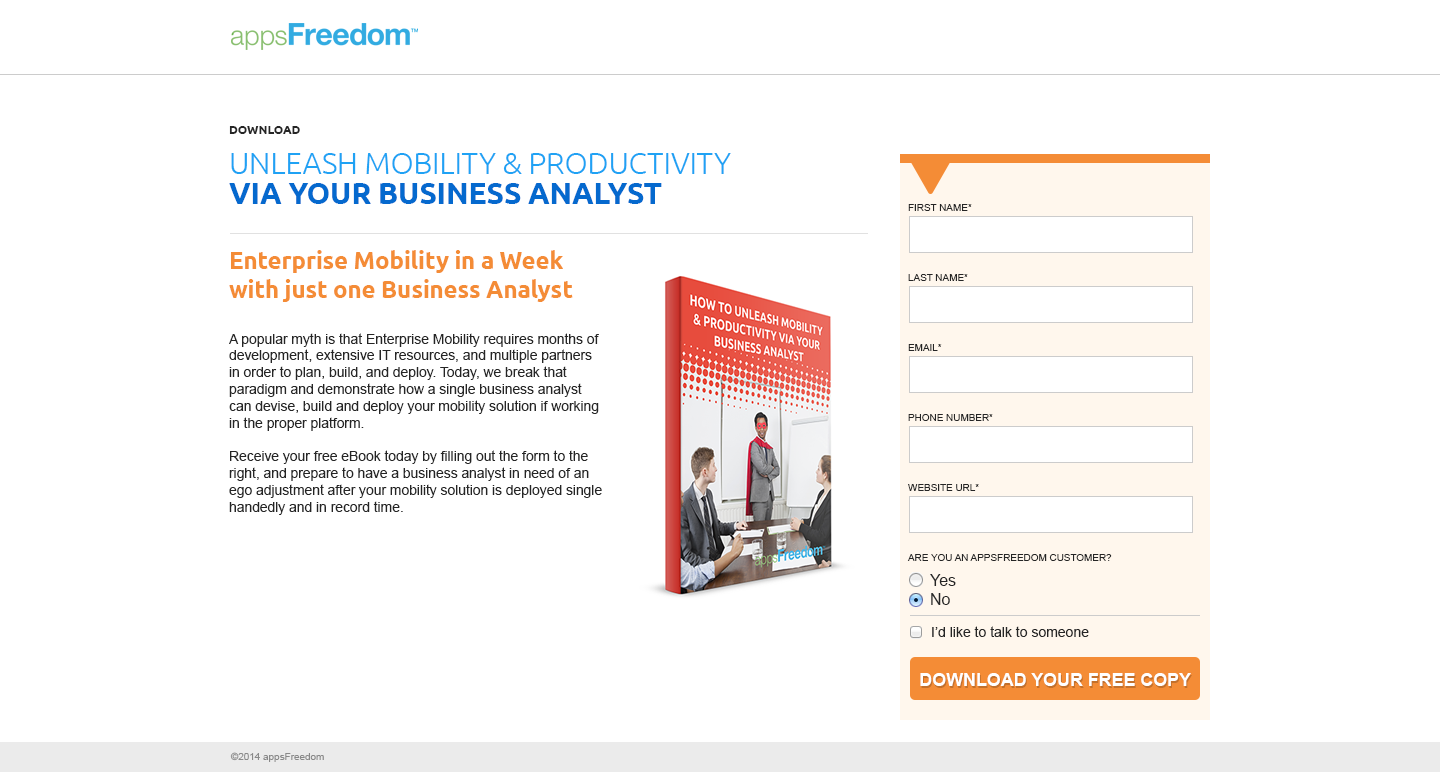
<style>
.page{position:relative;width:1440px;height:772px;background:#ffffff}
.page>*{position:absolute;margin:0}
.t1{font:14px "ArialMT";letter-spacing:-0.005em;color:#252525}
.t2{font:12px/40px "Ubuntu-Bold";letter-spacing:-0.005em;color:#252525;text-transform:uppercase}
.t3{font:30px/40px "Ubuntu-Light";letter-spacing:-0.005em;color:#1fa2f4;text-transform:uppercase}
.t4{font:30px/30px "Ubuntu-Bold";letter-spacing:-0.005em;color:#0569ce;text-transform:uppercase}
.t5{font:24px "Ubuntu-Bold";letter-spacing:-0.005em;color:#f48c36}
.t6{font:10px "ArialMT";letter-spacing:-0.005em;color:#252525;text-transform:uppercase}
.t7{font:16px "ArialMT";color:#252525}
.t8{font:14px "ArialMT";color:#252525}
.t9{font:18px "Arial-BoldMT";letter-spacing:-0.005em;color:#ffffff;text-transform:uppercase}
.t10{font:10px "ArialMT";letter-spacing:-0.005em;color:#898989}
</style>
<div class="page">
<p class="t1" style="left:229px;top:126px;width:502px;height:389px"><span class="t2">Download <br></span><span class="t3">Unleash Mobility &amp; Productivity <br></span><span class="t4">via your Business Analyst<br><br></span><span class="t5">Enterprise Mobility in a Week <br>with just one Business Analyst<br><br></span>A popular myth is that Enterprise Mobility requires months of <br>development, extensive IT resources, and multiple partners <br>in order to plan, build, and deploy. Today, we break that <br>paradigm and demonstrate how a single business analyst <br>can devise, build and deploy your mobility solution if working <br>in the proper platform.<br><br>Receive your free eBook today by filling out the form to the <br>right, and prepare to have a business analyst in need of an <br>ego adjustment after your mobility solution is deployed single <br>handedly and in record time.</p>
<p class="t6" style="left:908px;top:204px;width:64px;height:7px">First name*</p>
<p class="t6" style="left:908px;top:274px;width:60px;height:7px">Last name*</p>
<p class="t6" style="left:908px;top:344px;width:34px;height:7px">email*</p>
<p class="t6" style="left:908px;top:414px;width:85px;height:7px">phone number*</p>
<p class="t6" style="left:908px;top:484px;width:71px;height:7px">website url*</p>
<p class="t6" style="left:907px;top:554px;width:205px;height:7px">Are you an appsfreedom customer?</p>
<p class="t7" style="left:930px;top:574px;width:26px;height:31px">Yes<br>No</p>
<p class="t8" style="left:932px;top:626px;width:157px;height:11px">I’d like to talk to someone</p>
<p class="t9" style="left:920px;top:673px;width:271px;height:13px">Download Your Free Copy</p>
<p class="t10" style="left:230px;top:752px;width:94px;height:10px">©2014 appsFreedom</p>
</div>
